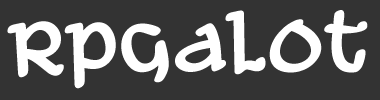
<style>
.page{position:relative;width:380px;height:100px;background:#333333}
.page>*{position:absolute;margin:0}
.t1{font:72px "AleandWenchesBBBold";color:#ffffff}
</style>
<div class="page">
<p class="t1" style="left:7px;top:10px;width:361px;height:79px">RPGalot</p>
</div>
